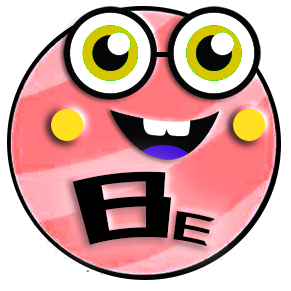
<style>
.page{position:relative;width:291px;height:291px;background:#ffffff}
.page>*{position:absolute;margin:0}
.t1{font:94px "ROGFonts-Regular";color:#000000}
.t2{font:41px "ROGFonts-Regular";color:#000000}
</style>
<div class="page">
<p class="t1" style="left:72px;top:171px;width:144px;height:76px">B<span class="t2">e</span></p>
</div>
